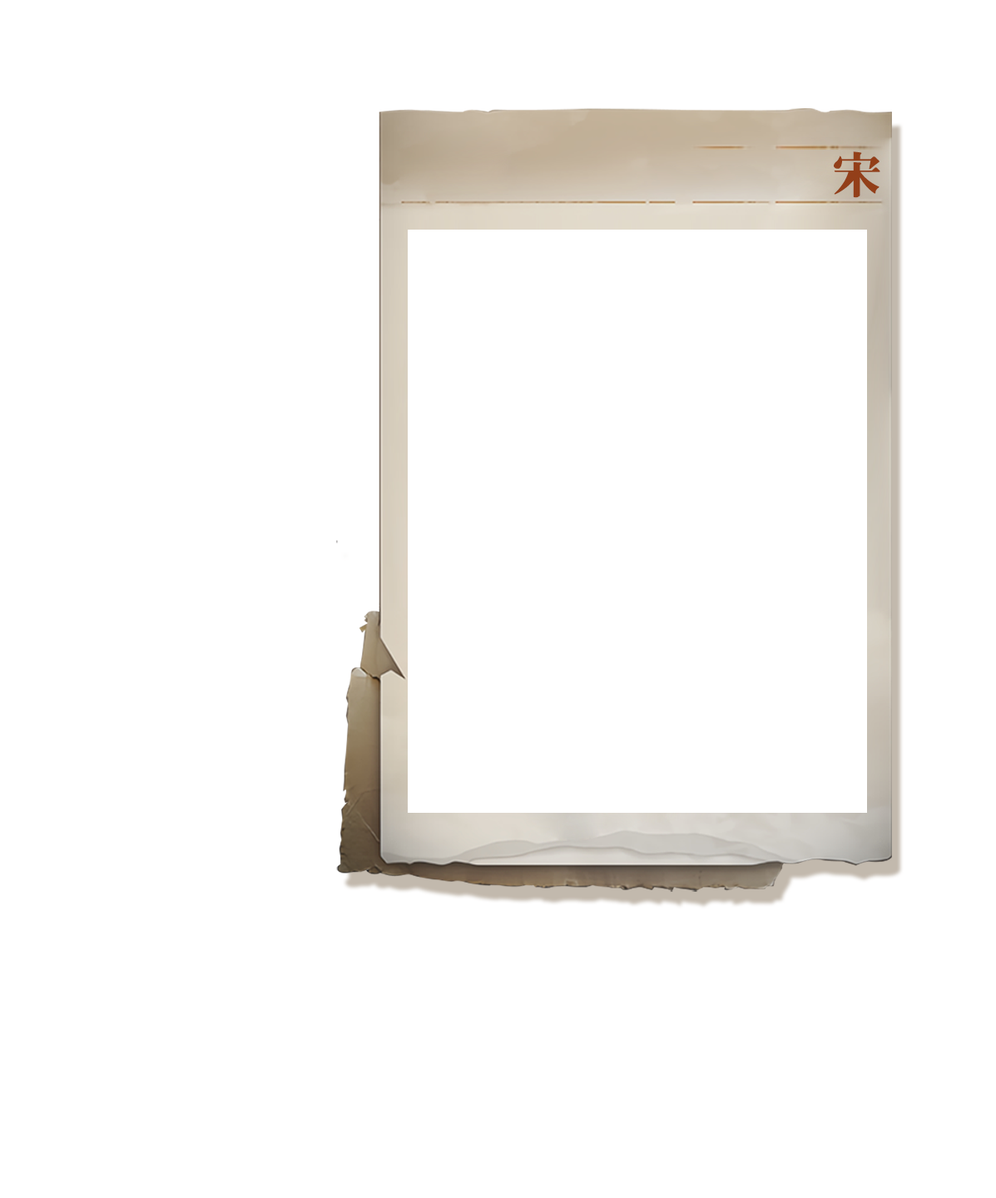
<style>
.page{position:relative;width:996px;height:1198px;background:#ffffff}
.page>*{position:absolute;margin:0}
.t1{font:49.7px "DATM8";letter-spacing:0.02em;color:#933f19}
</style>
<div class="page">
<p class="t1" style="left:833px;top:151px;width:47px;height:47px">宋</p>
</div>
